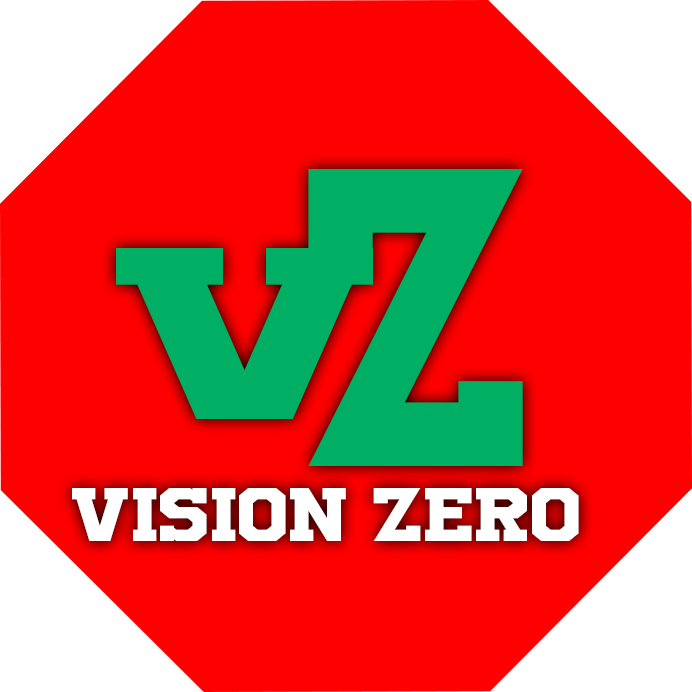
<style>
.page{position:relative;width:692px;height:692px;background:#ff0000}
.page>*{position:absolute;margin:0}
.t1{font:297px "UniversityRegular";color:#00af63}
.t2{font:170.9px "UniversityRegular";color:#00af63;scale:1.76 1}
.t3{font:52.6px "UniversityRegular";color:#ffffff;scale:1.24 1}
</style>
<div class="page">
<p class="t1" style="left:308px;top:169px;width:215px;height:297px">z</p>
<p class="t2" style="left:116px;top:248px;width:258px;height:171px">v</p>
<p class="t3" style="left:72px;top:488px;width:507px;height:53px">vision zero</p>
</div>
